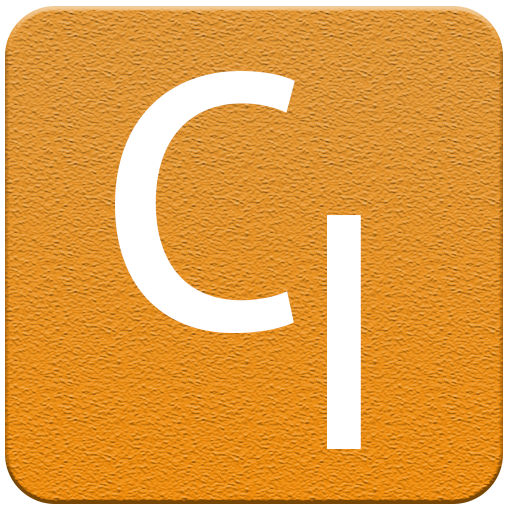
<style>
.page{position:relative;width:512px;height:512px}
.page>*{position:absolute;margin:0}
.t1{font:333.3px "AdobeFanHeitiStd-Bold";color:#ffffff}
.t2{font:291.7px "AdobeFanHeitiStd-Bold";color:#ffffff}
</style>
<div class="page">
<p class="t1" style="left:115px;top:71px;width:180px;height:263px">C</p>
<p class="t2" style="left:327px;top:215px;width:34px;height:234px">l</p>
</div>
